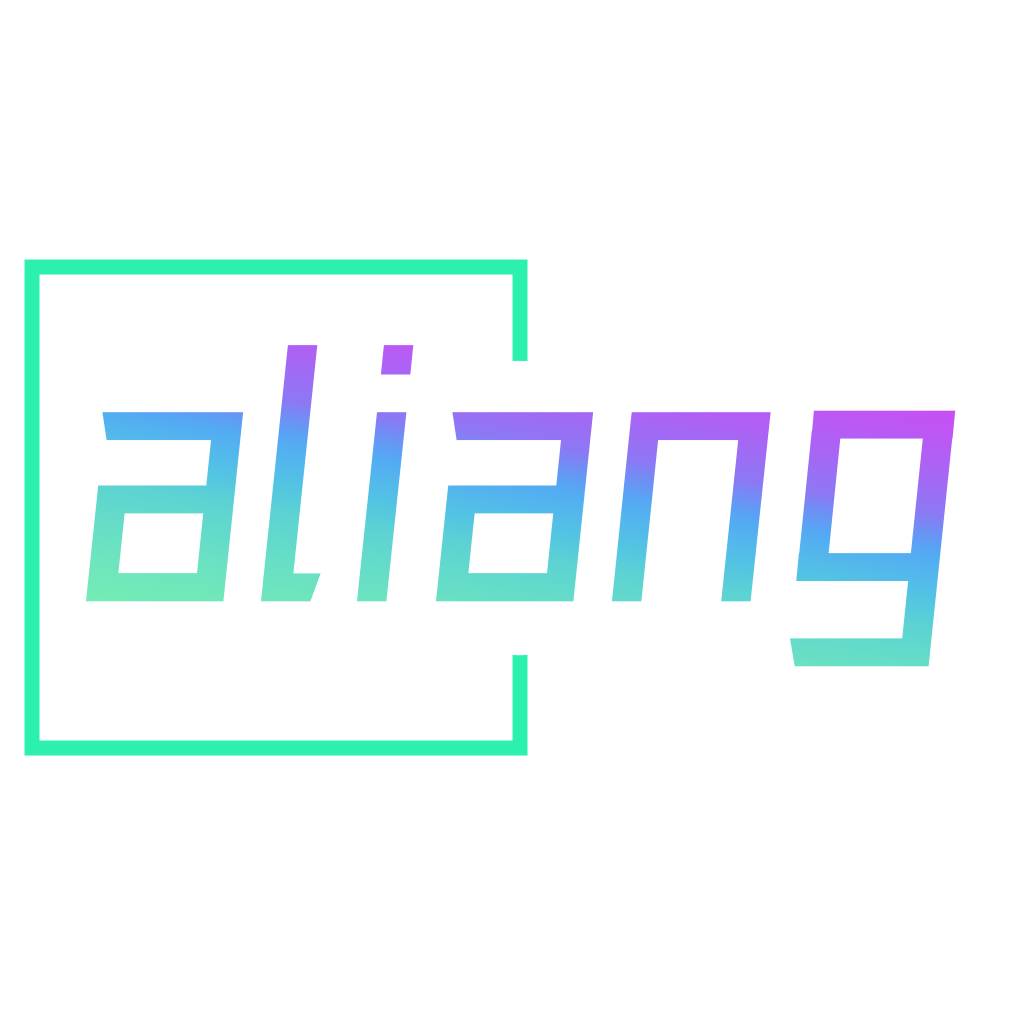
<style>
.page{position:relative;width:1024px;height:1024px;background:#ffffff}
.page>*{position:absolute;margin:0}
.t1{font:299.2px "FontquanXinYiGuanHeiTi-Regular"}
</style>
<div class="page">
<p class="t1" style="left:86px;top:345px;width:870px;height:322px">aliang</p>
</div>
